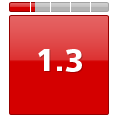
<style>
.page{position:relative;width:117px;height:117px;background:#d40000}
.page>*{position:absolute;margin:0}
.t1{font:36px "Colaborate-Bold";color:#ffffff;text-transform:uppercase}
</style>
<div class="page">
<p class="t1" style="left:38px;top:49px;width:44px;height:23px">1.3</p>
</div>
